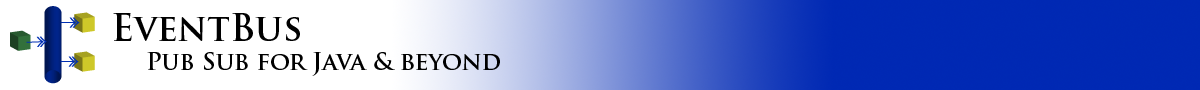
<style>
.page{position:relative;width:1200px;height:90px;background:#ffffff}
.page>*{position:absolute;margin:0}
.t1{font:36px "TrajanPro-Bold";color:#000000}
.t2{font:24px "TrajanPro-Bold";color:#000000}
</style>
<div class="page">
<p class="t1" style="left:113px;top:13px;width:187px;height:28px">EventBus</p>
<p class="t2" style="left:147px;top:52px;width:353px;height:24px">Pub Sub for Java &amp; beyond</p>
</div>
